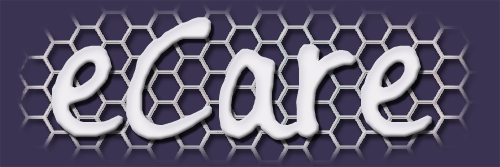
<style>
.page{position:relative;width:500px;height:167px;background:#3a3351}
.page>*{position:absolute;margin:0}
.t1{font:200px "BuxtonSketch";color:#eaeaea}
</style>
<div class="page">
<p class="t1" style="left:52px;top:17px;width:380px;height:123px">eCare</p>
</div>
